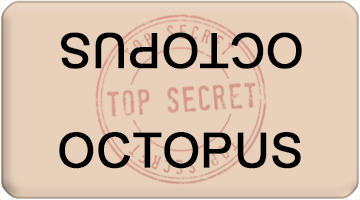
<style>
.page{position:relative;width:360px;height:200px;background:#e8d0bb}
.page>*{position:absolute;margin:0}
.t1{font:48px "ArialMT";color:#000000;font-weight:bold}
</style>
<div class="page">
<p class="t1" style="left:61px;top:32px;width:241px;height:37px;rotate:180deg">OCTOPUS</p>
<p class="t1" style="left:59px;top:132px;width:242px;height:37px">OCTOPUS</p>
</div>
